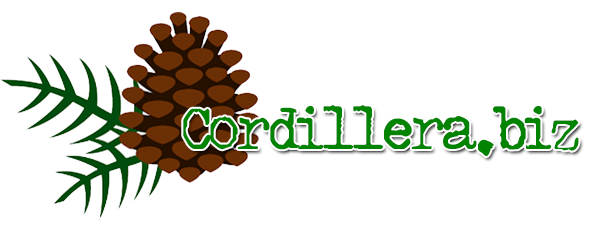
<style>
.page{position:relative;width:600px;height:232px;background:#ffffff}
.page>*{position:absolute;margin:0}
.t1{font:62.5px "GF-HaldaNormal";color:#028402}
</style>
<div class="page">
<p class="t1" style="left:183px;top:105px;width:396px;height:52px">Cordillera.biz</p>
</div>
